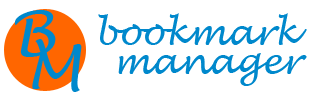
<style>
.page{position:relative;width:320px;height:100px;background:#ffffff}
.page>*{position:absolute;margin:0}
.t1{font:60px "LucidaHandwriting-Italic";letter-spacing:-0.01em;color:#0088cc}
.t2{font:36px "LucidaHandwriting-Italic";letter-spacing:-0.01em;color:#0088cc}
</style>
<div class="page">
<p class="t1" style="left:14px;top:10px;width:42px;height:47px">B</p>
<p class="t2" style="left:98px;top:13px;width:209px;height:32px">bookmark</p>
<p class="t1" style="left:32px;top:39px;width:50px;height:53px">M</p>
<p class="t2" style="left:118px;top:53px;width:189px;height:33px">manager</p>
</div>
